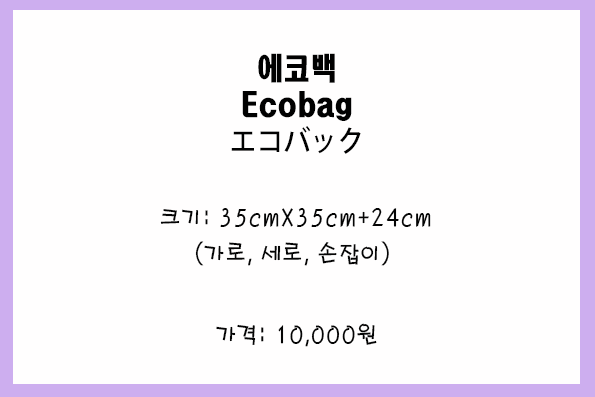
<style>
.page{position:relative;width:595px;height:397px;background:#fffefe}
.page>*{position:absolute;margin:0}
.t1{font:30px/36px "HeadlineR-HM";color:#010101;scale:0.9 1}
.t2{font:30px/36px "AdobeHeitiStd-Regular";color:#010101;scale:0.9 1}
.t3{font:24px/36px "H2porM";color:#040404;scale:0.9 1}
.t4{font:24px "H2porM";color:#040404;scale:0.9 1}
</style>
<div class="page">
<p class="t1" style="left:231px;top:53px;width:130px;height:101px;text-align:center">에코백<br>Ecobag<br><span class="t2">エコバック</span></p>
<p class="t3" style="left:160px;top:208px;width:271px;height:58px;text-align:center">크기: 35cmX35cm+24cm<br>(가로, 세로, 손잡이)</p>
<p class="t4" style="left:216px;top:323px;width:161px;height:24px">가격: 10,000원</p>
</div>
